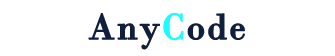
<style>
.page{position:relative;width:335px;height:56px;background:#ffffff}
.page>*{position:absolute;margin:0}
.t1{font:38px "BodoniMT";letter-spacing:0.025em;color:#0f1f3d;font-weight:bold}
.t2{font:38px "BodoniMT";letter-spacing:0.025em;color:#1bfcff;font-weight:bold}
</style>
<div class="page">
<p class="t1" style="left:88px;top:13px;width:157px;height:37px">Any<span class="t2">C</span>ode</p>
</div>
